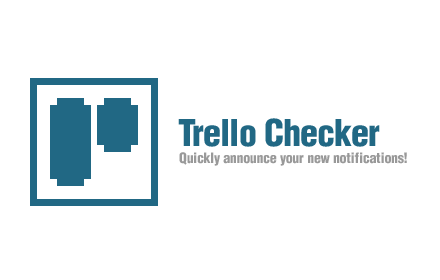
<style>
.page{position:relative;width:440px;height:280px;background:#ffffff}
.page>*{position:absolute;margin:0}
.t1{font:36px "Helvetica-CondensedBlack";letter-spacing:-0.025em;color:#216884}
.t2{font:14px "Helvetica-CondensedBlack";letter-spacing:-0.025em;color:#999999}
</style>
<div class="page">
<p class="t1" style="left:178px;top:118px;width:202px;height:29px">Trello Checker</p>
<p class="t2" style="left:179px;top:152px;width:228px;height:14px">Quickly announce your new notifications!</p>
</div>
